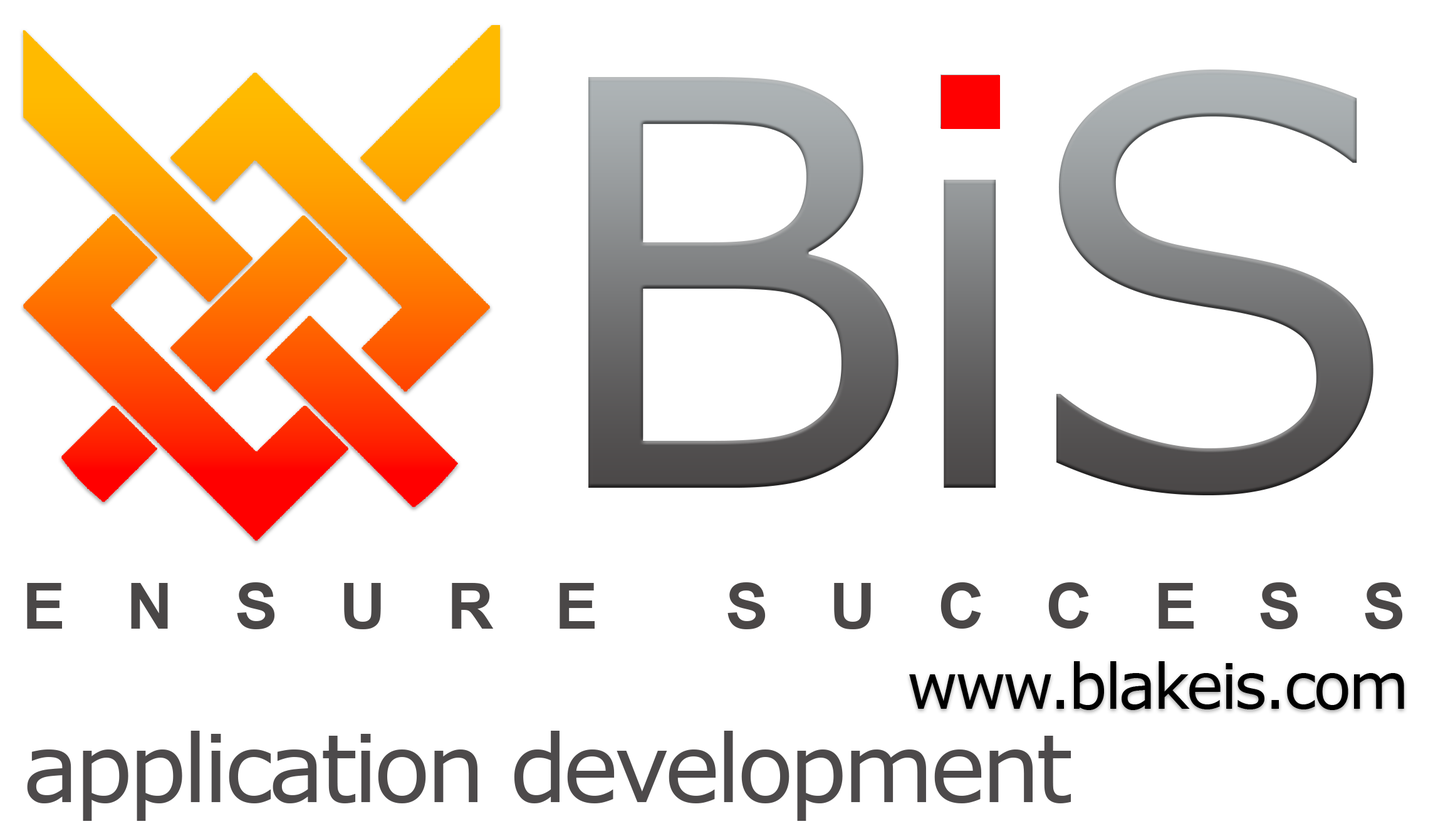
<style>
.page{position:relative;width:1438px;height:829px;background:#ffffff}
.page>*{position:absolute;margin:0}
.t1{font:565.1px "MSReferenceSansSerif";letter-spacing:-0.05em}
.t2{font:63.9px "Arial-BoldMT";letter-spacing:1em;color:#4a4747}
.t3{font:62.6px "MSReferenceSansSerif";letter-spacing:-0.05em;color:#000000}
.t4{font:94px "MSReferenceSansSerif";letter-spacing:-0.05em;color:#4d4a4b}
</style>
<div class="page">
<p class="t1" style="left:588px;top:70px;width:785px;height:426px">BiS</p>
<p class="t2" style="left:27px;top:583px;width:1376px;height:47px">ENSURE SUCCESS</p>
<p class="t3" style="left:909px;top:662px;width:495px;height:48px">www.blakeis.com</p>
<p class="t4" style="left:27px;top:731px;width:1044px;height:90px">application development</p>
</div>
